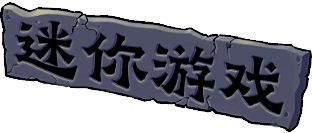
<style>
.page{position:relative;width:312px;height:133px;background:#ffffff}
.page>*{position:absolute;margin:0}
.t1{font:74.5px "GraveBustedStoneLishuSCRoughlyC";color:#000000;scale:1.04 1}
</style>
<div class="page">
<p class="t1" style="left:15px;top:21px;width:269px;height:94px;rotate:10deg">迷你游戏</p>
</div>
